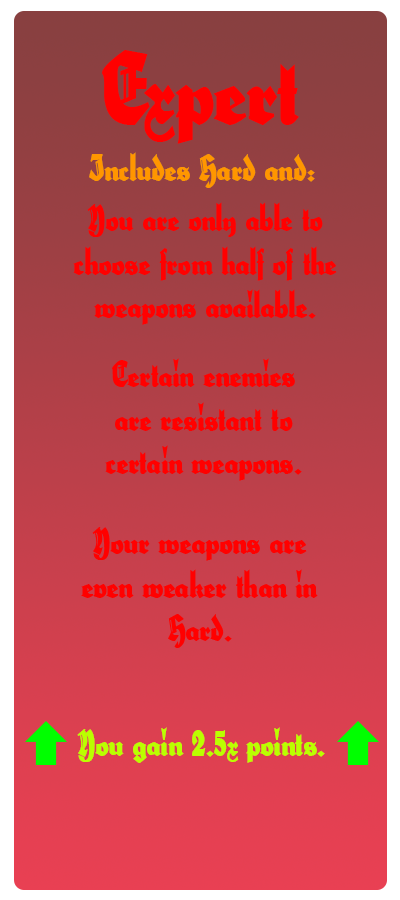
<style>
.page{position:relative;width:400px;height:900px}
.page>*{position:absolute;margin:0}
.t1{font:100px "HerzogVonGraf";color:#ff0000}
.t2{font:36px "HerzogVonGraf";color:#ff9600}
.t3{font:36px "HerzogVonGraf";color:#ff0000}
.t4{font:36px "HerzogVonGraf";color:#baff00}
</style>
<div class="page">
<p class="t1" style="left:102px;top:50px;width:197px;height:94px">Expert</p>
<p class="t2" style="left:89px;top:152px;width:226px;height:36px">Includes Hard and:</p>
<p class="t3" style="left:73px;top:202px;width:264px;height:123px;text-align:center">You are only able to choose from half of the weapons available.</p>
<p class="t3" style="left:105px;top:358px;width:197px;height:123px;text-align:center">Certain enemies are resistant to certain weapons.</p>
<p class="t3" style="left:81px;top:527px;width:237px;height:121px;text-align:center">Your weapons are even weaker than in Hard.</p>
<p class="t4" style="left:77px;top:727px;width:248px;height:36px">You gain 2.5x points.</p>
</div>
